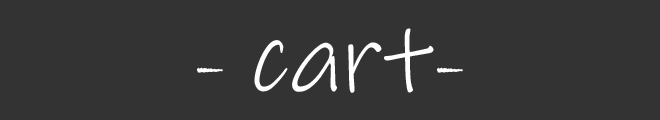
<style>
.page{position:relative;width:660px;height:120px;background:#333333}
.page>*{position:absolute;margin:0}
.t1{font:100px "InkFree";color:#fefeff}
.t2{font:100px "BradleyHandITC";color:#fefeff}
</style>
<div class="page">
<p class="t1" style="left:197px;top:28px;width:266px;height:65px"><span class="t2">- </span>cart<span class="t2">-</span></p>
</div>
